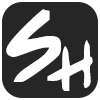
<style>
.page{position:relative;width:100px;height:100px;background:#262626}
.page>*{position:absolute;margin:0}
.t1{font:92.1px "PPHandwritingNormal";letter-spacing:-0.025em;color:#ffffff;font-weight:bold}
</style>
<div class="page">
<p class="t1" style="left:6px;top:9px;width:55px;height:73px">S</p>
<p class="t1" style="left:47px;top:40px;width:46px;height:51px">h</p>
</div>
